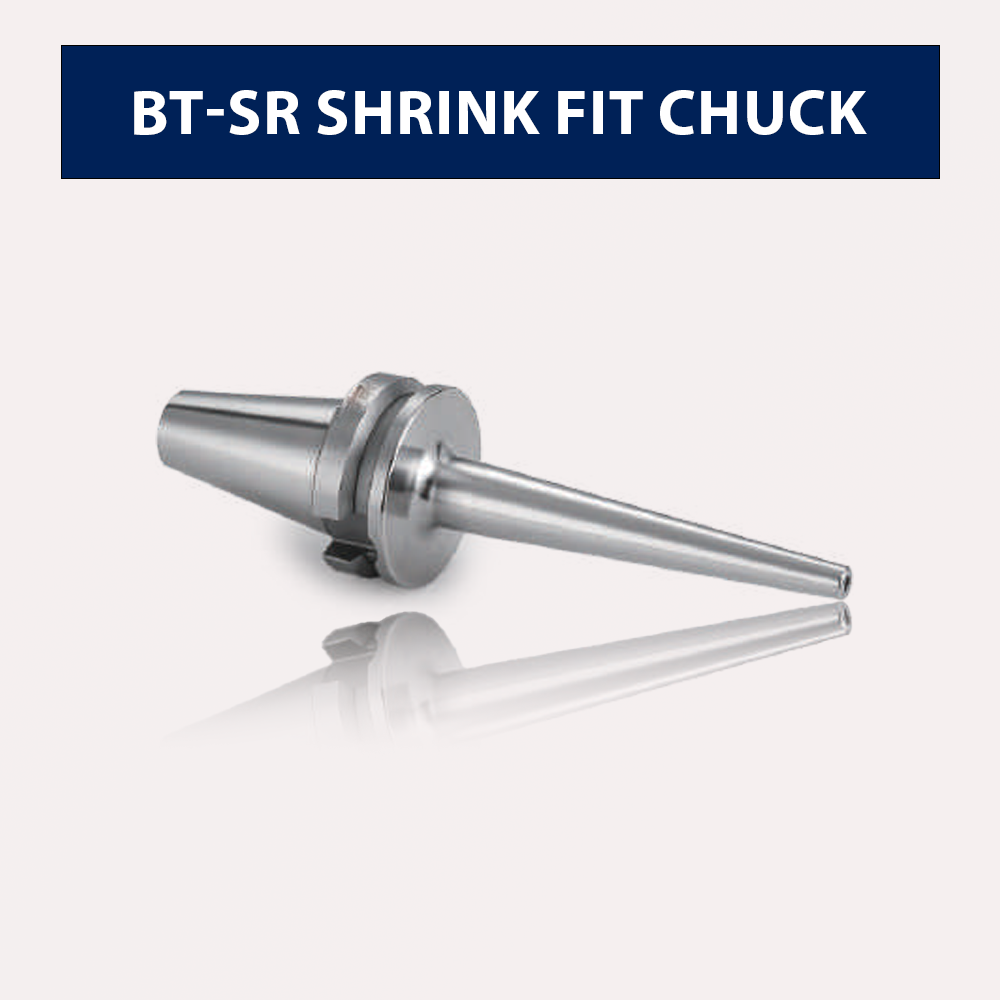
<style>
.page{position:relative;width:1000px;height:1000px;background:#f5efef}
.page>*{position:absolute;margin:0}
.t1{font:64px "MyriadPro-Bold";color:#ffffff;text-transform:uppercase}
</style>
<div class="page">
<p class="t1" style="left:134px;top:90px;width:733px;height:45px">bt-SR SHRINK FIT CHUCK</p>
</div>
